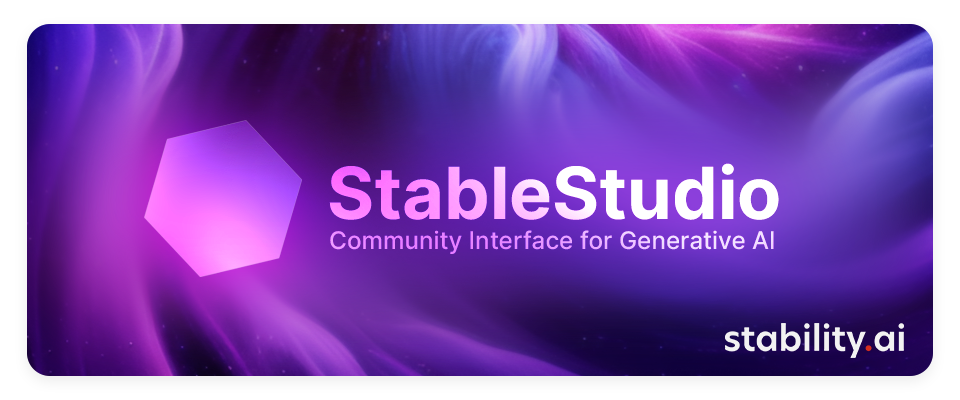
<style>
.page{position:relative;width:960px;height:400px}
.page>*{position:absolute;margin:0}
.t1{font:72px "Inter-Bold"}
.t2{font:24.3px "Inter-Medium"}
</style>
<div class="page">
<p class="t1" style="left:329px;top:163px;width:450px;height:57px">StableStudio</p>
<p class="t1" style="left:329px;top:163px;width:450px;height:57px">StableStudio</p>
<p class="t2" style="left:330px;top:230px;width:444px;height:24px">Community Interface for Generative AI</p>
<p class="t2" style="left:330px;top:230px;width:444px;height:24px">Community Interface for Generative AI</p>
</div>
